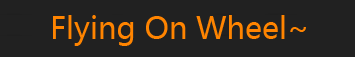
<style>
.page{position:relative;width:355px;height:57px;background:#212121}
.page>*{position:absolute;margin:0}
.t1{font:30px "MicrosoftYaHei";color:#ff8400}
</style>
<div class="page">
<p class="t1" style="left:53px;top:15px;width:253px;height:31px">Flying On Wheel~</p>
</div>
